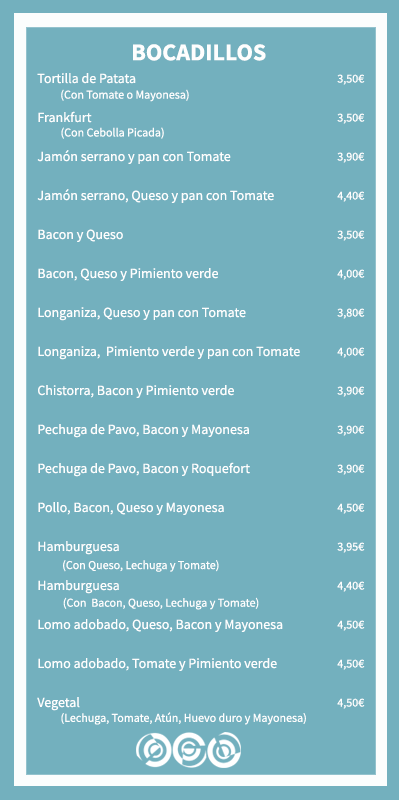
<style>
.page{position:relative;width:399px;height:800px;background:#73b0be}
.page>*{position:absolute;margin:0}
.t1{font:24px "SourceSansPro-Bold";color:#fefefe}
.t2{font:14px/13px "SourceSansPro-Regular";color:#fefefe}
.t3{font:12px/13px "SourceSansPro-Regular";color:#fefefe}
.t4{font:12px "SourceSansPro-Regular";color:#fefefe}
</style>
<div class="page">
<p class="t1" style="left:133px;top:44px;width:133px;height:17px">BOCADILLOS</p>
<p class="t2" style="left:37px;top:73px;width:263px;height:638px">Tortilla de Patata<br><br><br>Frankfurt<br><br><br>Jamón serrano y pan con Tomate<br><br><br>Jamón serrano, Queso y pan con Tomate<br><br><br>Bacon y Queso<br><br><br>Bacon, Queso y Pimiento verde<br><br><br>Longaniza, Queso y pan con Tomate<br><br><br>Longaniza,  Pimiento verde y pan con Tomate<br><br><br>Chistorra, Bacon y Pimiento verde<br><br><br>Pechuga de Pavo, Bacon y Mayonesa<br><br><br>Pechuga de Pavo, Bacon y Roquefort<br><br><br>Pollo, Bacon, Queso y Mayonesa<br><br><br>Hamburguesa<br><br><br>Hamburguesa<br><br><br>Lomo adobado, Queso, Bacon y Mayonesa<br><br><br>Lomo adobado, Tomate y Pimiento verde<br><br><br>Vegetal</p>
<p class="t3" style="left:337px;top:74px;width:28px;height:635px">3,50€<br><br><br>3,50€<br><br><br>3,90€<br><br><br>4,40€<br><br><br>3,50€<br><br><br>4,00€<br><br><br>3,80€<br><br><br>4,00€<br><br><br>3,90€<br><br><br>3,90€<br><br><br>3,90€<br><br><br>4,50€<br><br><br>3,95€<br><br><br>4,40€<br><br><br>4,50€<br><br><br>4,50€<br><br><br>4,50€</p>
<p class="t4" style="left:61px;top:89px;width:128px;height:13px">(Con Tomate o Mayonesa)</p>
<p class="t4" style="left:61px;top:127px;width:103px;height:12px">(Con Cebolla Picada)</p>
<p class="t4" style="left:63px;top:560px;width:156px;height:12px">(Con Queso, Lechuga y Tomate)</p>
<p class="t4" style="left:63px;top:597px;width:196px;height:13px">(Con  Bacon, Queso, Lechuga y Tomate)</p>
<p class="t4" style="left:61px;top:712px;width:245px;height:13px">(Lechuga, Tomate, Atún, Huevo duro y Mayonesa)</p>
</div>
